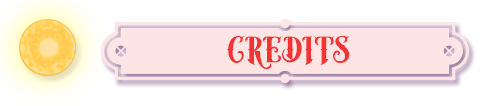
<style>
.page{position:relative;width:484px;height:106px;background:#ffffff}
.page>*{position:absolute;margin:0}
.t1{font:41.7px "Moyers";color:#f23434}
</style>
<div class="page">
<p class="t1" style="left:227px;top:36px;width:123px;height:34px">CREDITS</p>
</div>
